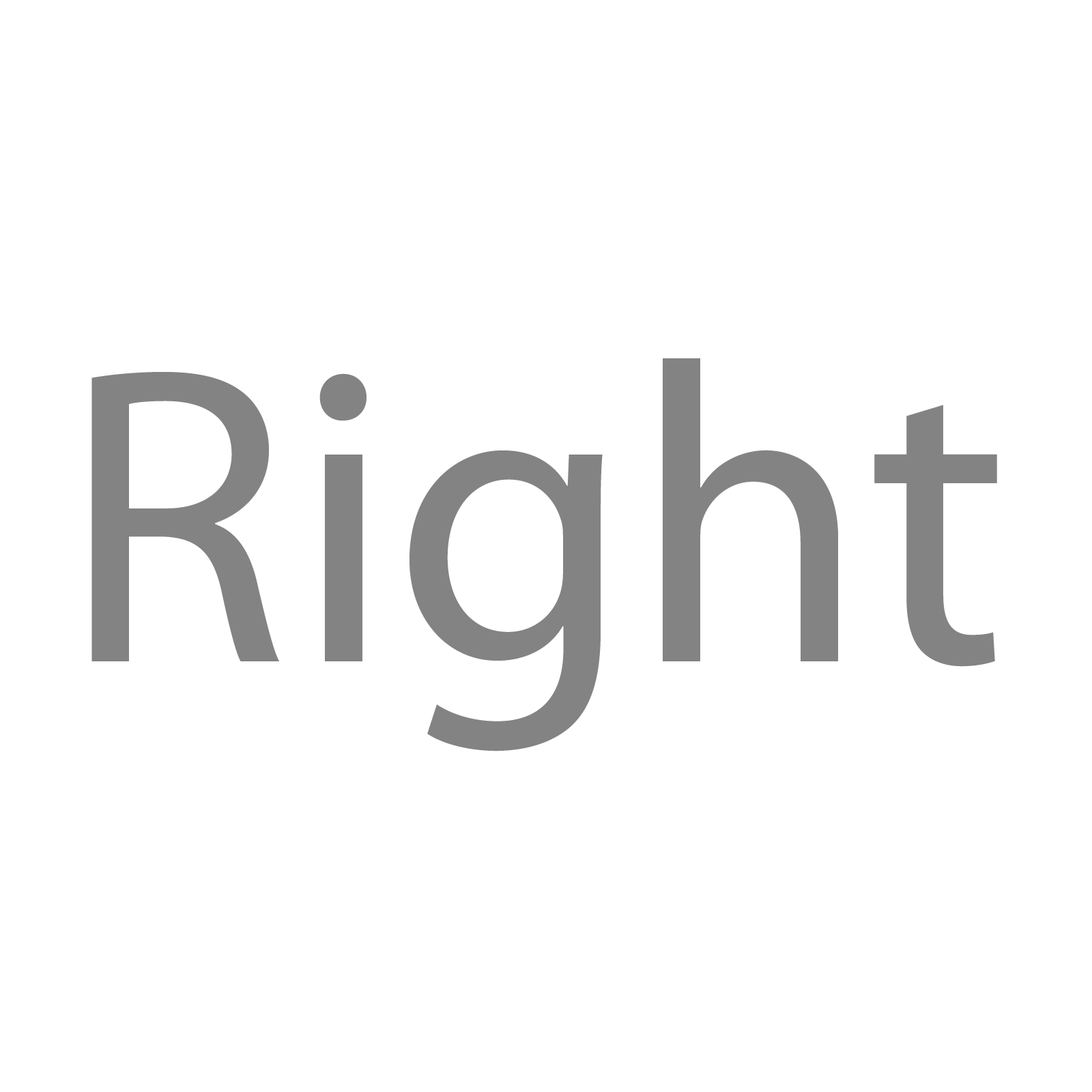
<style>
.page{position:relative;width:1092px;height:1092px;background:#ffffff}
.page>*{position:absolute;margin:0}
.t1{font:426.6px "MyriadPro-Regular";color:#838383}
</style>
<div class="page">
<p class="t1" style="left:91px;top:358px;width:906px;height:393px">Right</p>
</div>
